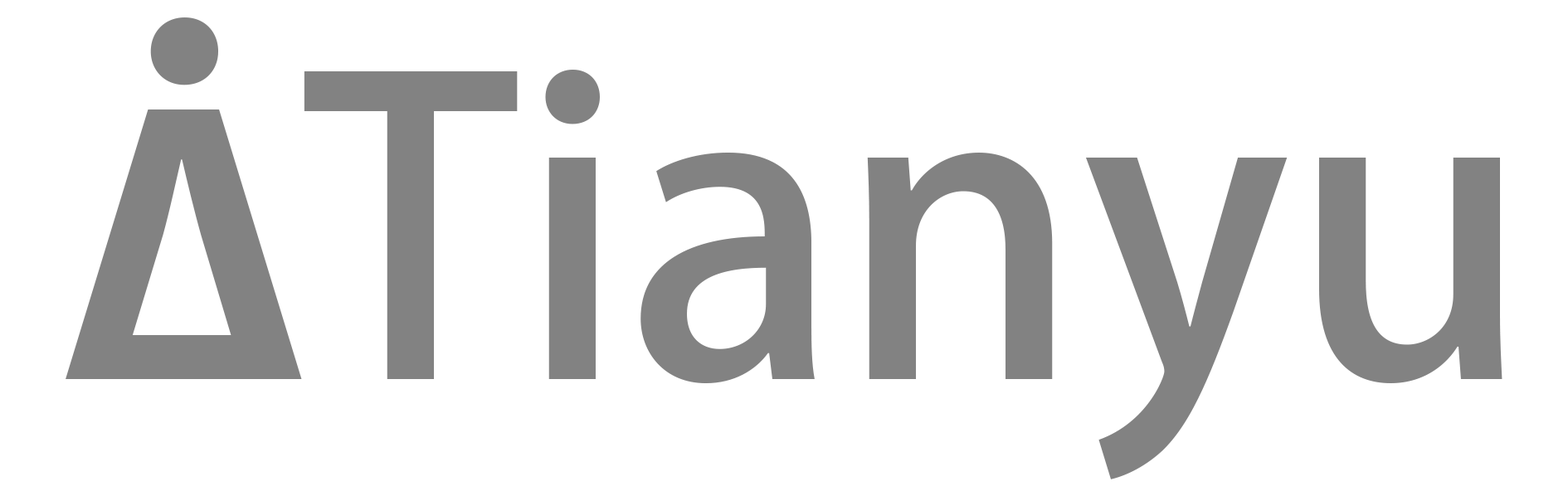
<style>
.page{position:relative;width:1568px;height:496px;background:#ffffff}
.page>*{position:absolute;margin:0}
.t1{font:402.1px "AdobeHeitiStd-Regular";color:#828282}
</style>
<div class="page">
<p class="t1" style="left:304px;top:70px;width:1198px;height:410px">Tianyu</p>
</div>
